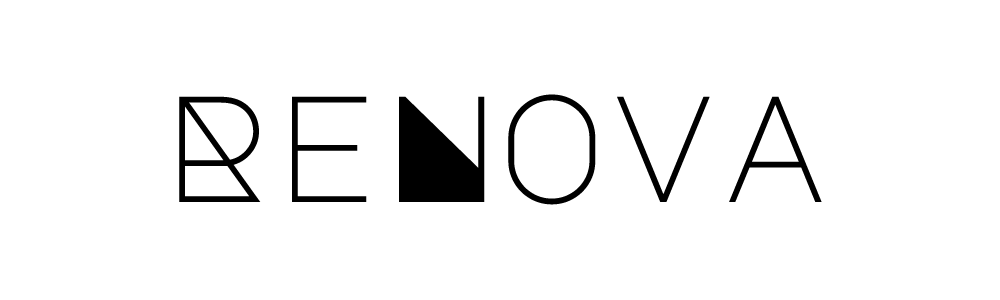
<style>
.page{position:relative;width:1000px;height:300px;background:#ffffff}
.page>*{position:absolute;margin:0}
.t1{font:151px "MajorMonoDisplay-Regular";color:#000000}
</style>
<div class="page">
<p class="t1" style="left:179px;top:94px;width:643px;height:111px">ReNova</p>
</div>
